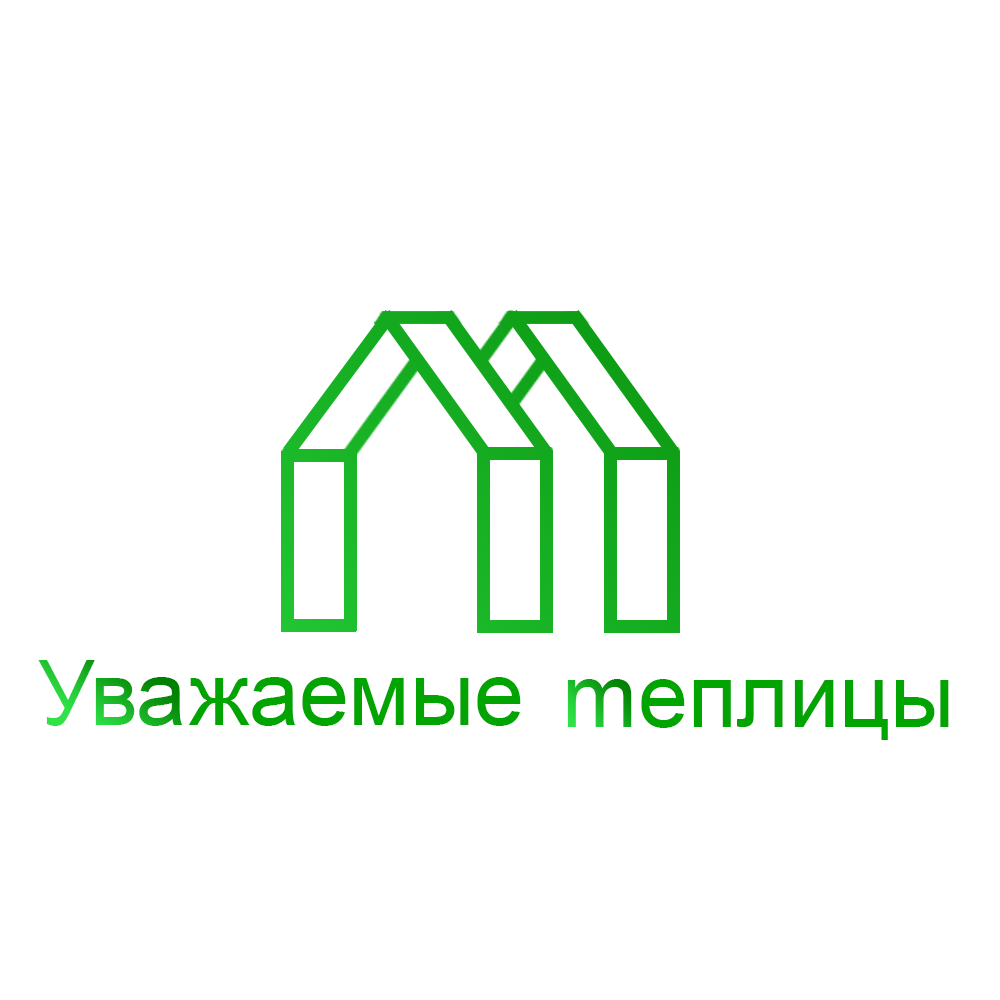
<style>
.page{position:relative;width:1000px;height:1000px;background:#ffffff}
.page>*{position:absolute;margin:0}
.t1{font:89.6px "ArialMT"}
.t2{font:89.6px "ArialMT";color:#01a401}
</style>
<div class="page">
<p class="t1" style="left:38px;top:660px;width:145px;height:66px">Ува</p>
<p class="t2" style="left:188px;top:677px;width:333px;height:49px">жаемые</p>
<p class="t1" style="left:567px;top:679px;width:65px;height:48px">m</p>
<p class="t2" style="left:641px;top:679px;width:308px;height:61px">еплицы</p>
</div>
